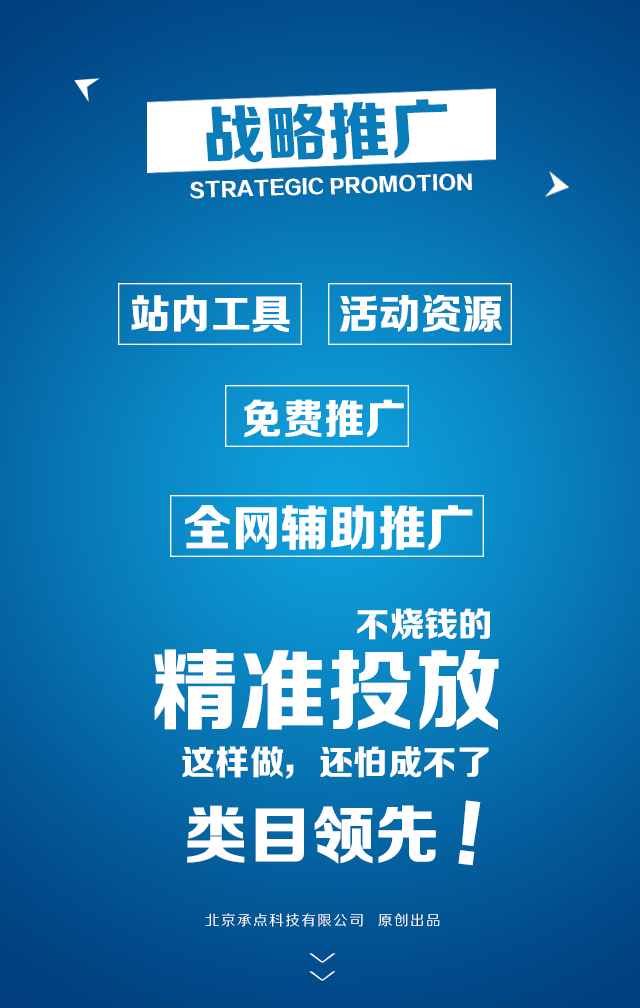
<style>
.page{position:relative;width:640px;height:1008px}
.page>*{position:absolute;margin:0}
.t1{font:63.7px "FZZDHJW--GB1-0";letter-spacing:0.005em;color:#087dba;text-transform:uppercase}
.t2{font:19.2px "FZZDHJW--GB1-0";letter-spacing:0.005em;color:#ffffff;text-transform:uppercase}
.t3{font:40.8px "FZZDHJW--GB1-0";letter-spacing:0.005em;color:#ffffff;text-transform:uppercase}
.t4{font:41.3px "FZZDHJW--GB1-0";letter-spacing:0.005em;color:#ffffff;text-transform:uppercase}
.t5{font:49.4px "FZZDHJW--GB1-0";letter-spacing:0.005em;color:#ffffff;text-transform:uppercase}
.t6{font:34.3px "FZZDHJW--GB1-0";letter-spacing:0.005em;color:#ffffff;text-transform:uppercase}
.t7{font:88.7px "FZZDHJW--GB1-0";letter-spacing:0.005em;color:#ffffff;text-transform:uppercase}
.t8{font:63.6px "FZZDHJW--GB1-0";letter-spacing:0.005em;color:#ffffff;text-transform:uppercase}
.t9{font:75.3px "FZZDHJW--GB1-0";letter-spacing:0.005em;color:#ffffff;text-transform:uppercase}
.t10{font:14.2px "FZZHJW--GB1-0";letter-spacing:0.1em;color:#ffffff;text-transform:uppercase}
.t11{font:36.8px "FZZXHJW--GB1-0";letter-spacing:0.5em;color:#ffffff;text-transform:uppercase;scale:0.44 1}
</style>
<div class="page">
<p class="t1" style="left:206px;top:99px;width:242px;height:64px;rotate:-2deg">战略推广</p>
<p class="t2" style="left:190px;top:173px;width:282px;height:26px;rotate:-2deg">Strategic promotion</p>
<p class="t3" style="left:131px;top:295px;width:159px;height:37px">站内工具</p>
<p class="t3" style="left:339px;top:295px;width:163px;height:37px">活动资源</p>
<p class="t4" style="left:244px;top:399px;width:160px;height:39px">免费推广</p>
<p class="t5" style="left:185px;top:505px;width:288px;height:45px">全网辅助推广</p>
<p class="t6" style="left:357px;top:608px;width:133px;height:32px">不烧钱的</p>
<p class="t7" style="left:154px;top:649px;width:345px;height:81px">精准投放</p>
<p class="t6" style="left:182px;top:746px;width:307px;height:33px">这样做，还怕成不了</p>
<p class="t8" style="left:187px;top:805px;width:249px;height:59px">类目领先</p>
<p class="t9" style="left:458px;top:800px;width:23px;height:66px;rotate:7deg">！</p>
<p class="t10" style="left:205px;top:913px;width:235px;height:14px">北京承点科技有限公司  原创出品</p>
<p class="t11" style="left:309px;top:953px;width:27px;height:28px;rotate:90deg">&gt;&gt;</p>
</div>
